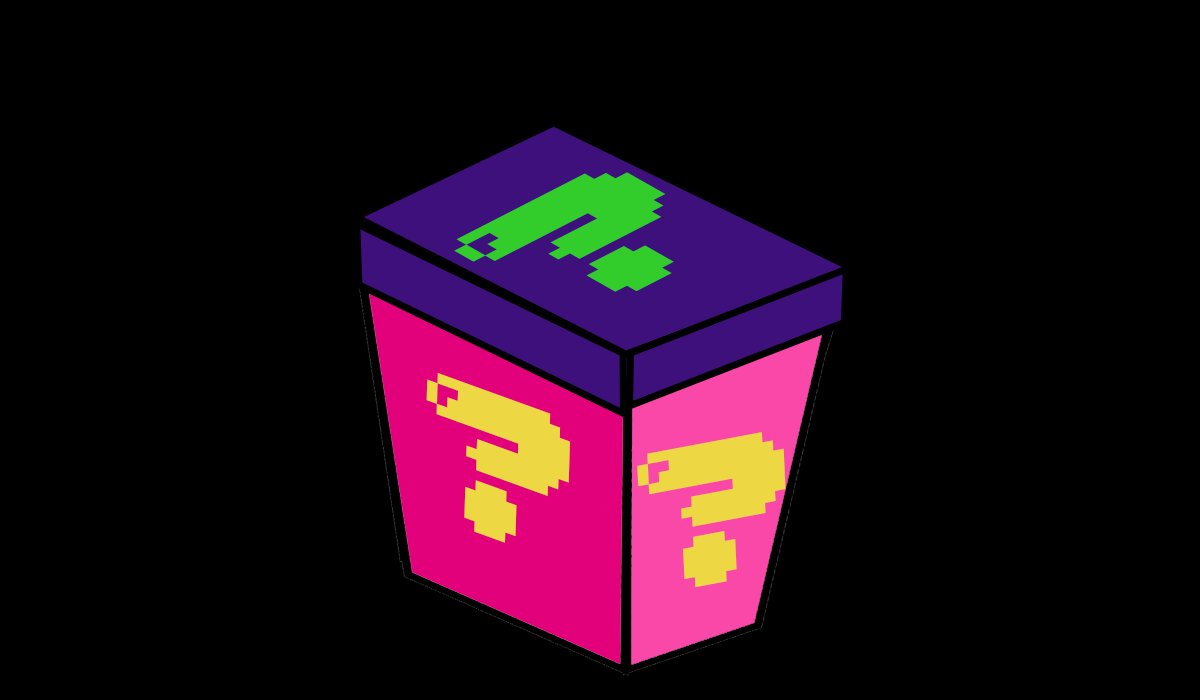
<style>
.page{position:relative;width:1200px;height:700px;background:#000000}
.page>*{position:absolute;margin:0}
.t1{font:186px "04b30";color:#32cd2b;scale:1.2 1}
.t2{font:174.6px "04b30";color:#edd743;scale:1.06 1}
.t3{font:171.6px "04b30";color:#edd743;scale:1.05 1}
</style>
<div class="page">
<p class="t1" style="left:454px;top:172px;width:220px;height:120px;rotate:-27deg">?</p>
<p class="t2" style="left:426px;top:373px;width:144px;height:170px;rotate:20deg">?</p>
<p class="t3" style="left:637px;top:432px;width:149px;height:156px;rotate:-11deg">?</p>
</div>
